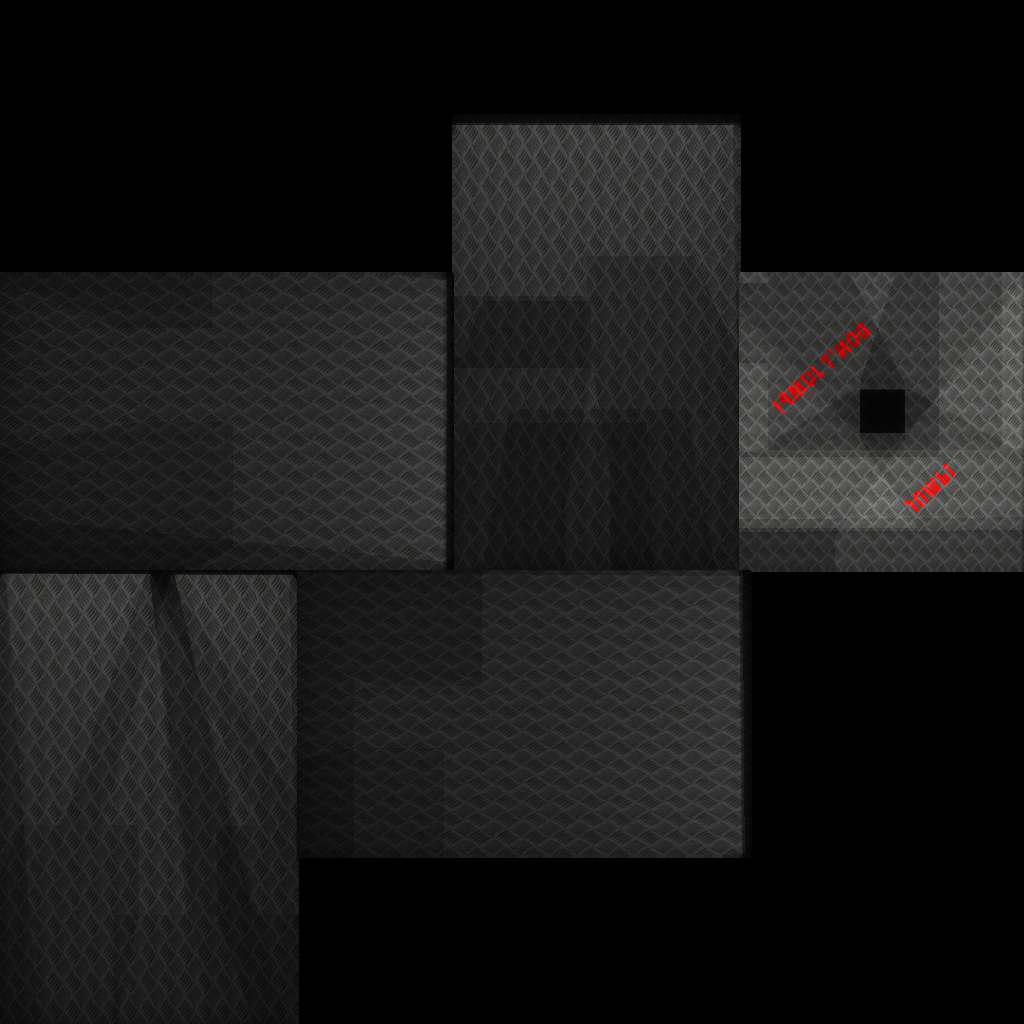
<style>
.page{position:relative;width:1024px;height:1024px;background:#000000}
.page>*{position:absolute;margin:0}
.t1{font:24px "TwCenMT-CondensedExtraBold";letter-spacing:0.005em}
.t2{font:24px "TwCenMT-CondensedExtraBold";letter-spacing:0.005em;color:#ff0000}
</style>
<div class="page">
<p class="t1" style="left:772px;top:321px;width:100px;height:93px;rotate:138deg">DON’T JUMP!</p>
<p class="t2" style="left:904px;top:463px;width:53px;height:49px;rotate:-44deg">JUMP!</p>
</div>
